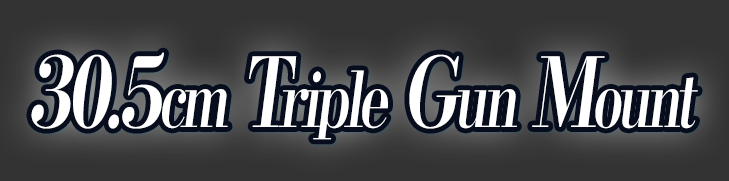
<style>
.page{position:relative;width:729px;height:181px;background:#333333}
.page>*{position:absolute;margin:0}
.t1{font:76.8px "KochoStd-Heavy";letter-spacing:-0.08em;color:#ffffff;font-style:italic;scale:0.72 1}
.t2{font:96px "KochoStd-Heavy";letter-spacing:-0.08em;color:#ffffff;font-style:italic;scale:0.72 1}
</style>
<div class="page">
<p class="t1" style="left:31px;top:52px;width:667px;height:88px"><span class="t2">30.5</span>cm<span class="t2"> T</span>riple<span class="t2"> G</span>un<span class="t2"> M</span>ount</p>
</div>
